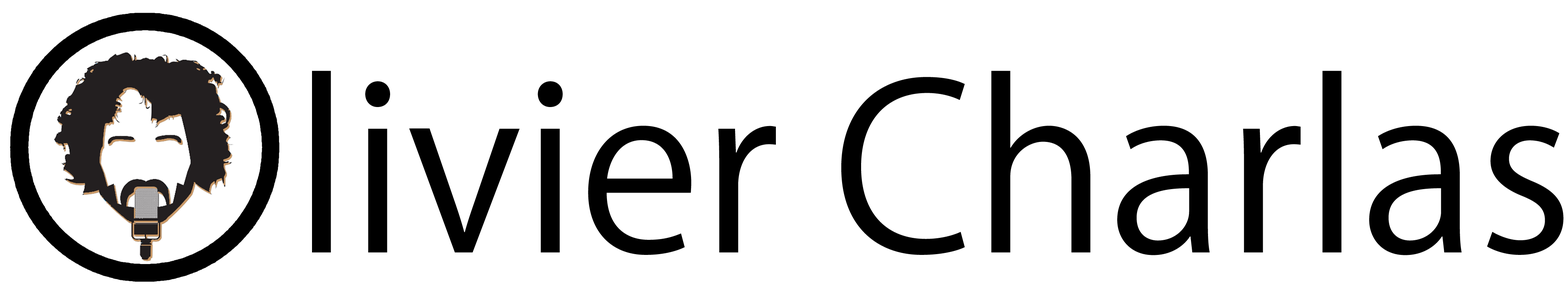
<style>
.page{position:relative;width:1568px;height:289px;background:#ffffff}
.page>*{position:absolute;margin:0}
.t1{font:226.8px "KozGoPr6N-Regular";color:#000000}
</style>
<div class="page">
<p class="t1" style="left:312px;top:71px;width:1252px;height:184px">livier Charlas</p>
</div>
